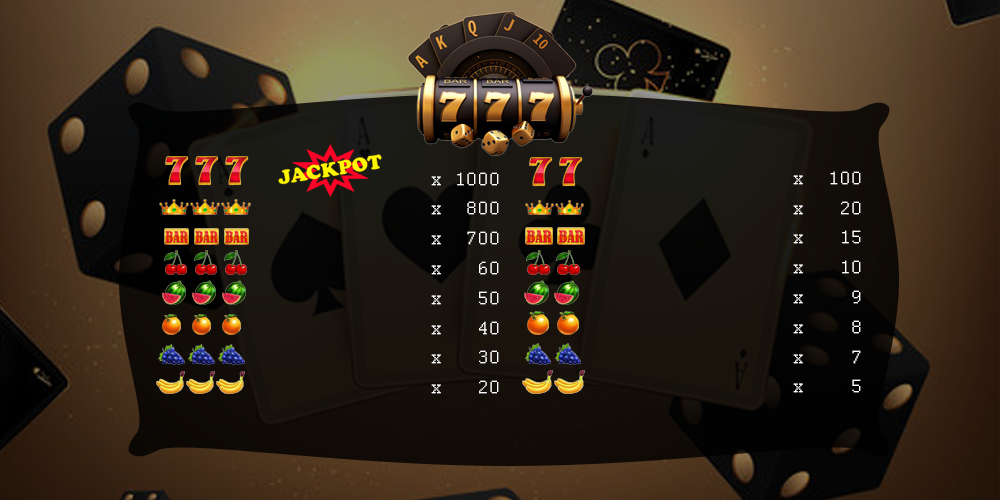
<style>
.page{position:relative;width:1000px;height:500px}
.page>*{position:absolute;margin:0}
.t1{font:20.2px "Courier";color:#ffffff}
</style>
<div class="page">
<p class="t1" style="left:431px;top:172px;width:68px;height:14px">x 1000</p>
<p class="t1" style="left:793px;top:171px;width:68px;height:14px">x  100</p>
<p class="t1" style="left:431px;top:201px;width:68px;height:14px">x  800</p>
<p class="t1" style="left:793px;top:201px;width:68px;height:14px">x   20</p>
<p class="t1" style="left:431px;top:231px;width:68px;height:14px">x  700</p>
<p class="t1" style="left:793px;top:230px;width:68px;height:14px">x   15</p>
<p class="t1" style="left:431px;top:261px;width:68px;height:14px">x   60</p>
<p class="t1" style="left:793px;top:260px;width:68px;height:14px">x   10</p>
<p class="t1" style="left:431px;top:291px;width:68px;height:14px">x   50</p>
<p class="t1" style="left:793px;top:290px;width:68px;height:14px">x    9</p>
<p class="t1" style="left:431px;top:321px;width:68px;height:14px">x   40</p>
<p class="t1" style="left:793px;top:320px;width:68px;height:14px">x    8</p>
<p class="t1" style="left:431px;top:350px;width:68px;height:14px">x   30</p>
<p class="t1" style="left:793px;top:350px;width:68px;height:14px">x    7</p>
<p class="t1" style="left:431px;top:380px;width:68px;height:14px">x   20</p>
<p class="t1" style="left:793px;top:379px;width:68px;height:14px">x    5</p>
</div>
